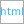
<style>
.page{position:relative;width:24px;height:24px;background:#ffffff}
.page>*{position:absolute;margin:0}
.t1{font:10.3px "DejaVuSans";color:#32b6ff}
</style>
<div class="page">
<p class="t1" style="left:0px;top:7px;width:23px;height:8px">html</p>
</div>
